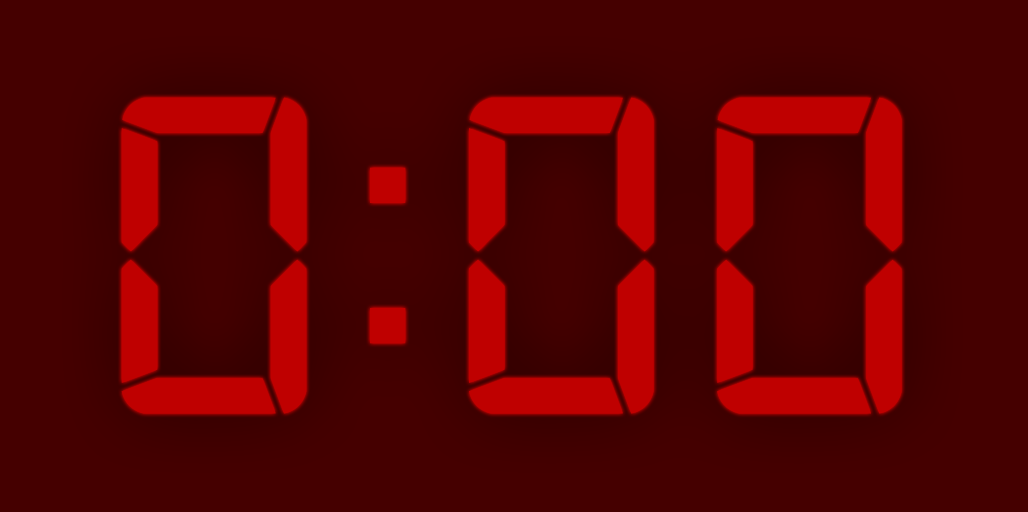
<style>
.page{position:relative;width:1028px;height:512px;background:#450000}
.page>*{position:absolute;margin:0}
.t1{font:482.1px "Digital-7";letter-spacing:0.015em;color:#bf0000;font-weight:bold}
</style>
<div class="page">
<p class="t1" style="left:121px;top:97px;width:781px;height:317px">0:00</p>
<p class="t1" style="left:122px;top:96px;width:780px;height:317px">0:00</p>
</div>
